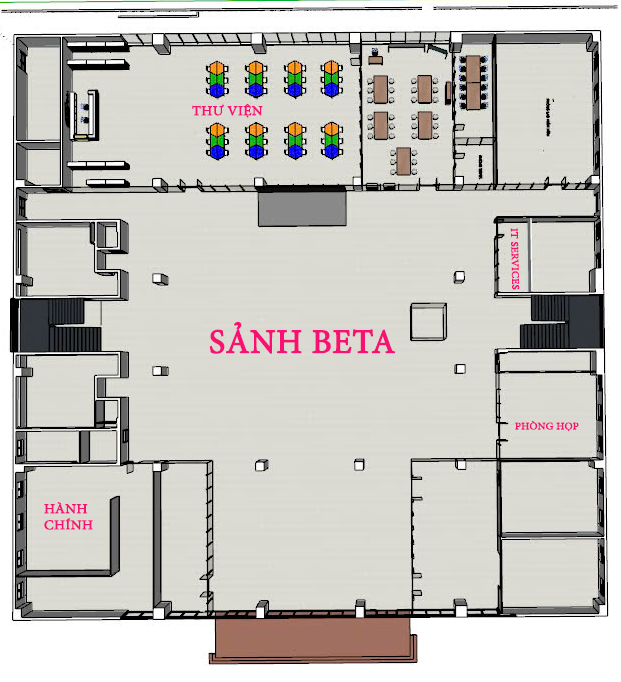
<style>
.page{position:relative;width:621px;height:682px;background:#dbdbd3}
.page>*{position:absolute;margin:0}
.t1{font:13.5px "MinionPro-Regular";color:#f81173;font-weight:bold;scale:1.07 1}
.t2{font:10px "MinionPro-Regular";color:#f81173;font-weight:bold;scale:1.06 1}
.t3{font:34px "MinionPro-Regular";color:#f81173;font-weight:bold}
</style>
<div class="page">
<p class="t1" style="left:192px;top:103px;width:71px;height:15px">THƯ VIỆN</p>
<p class="t2" style="left:510px;top:228px;width:10px;height:62px;rotate:89deg">IT SERVICES</p>
<p class="t3" style="left:209px;top:321px;width:186px;height:33px">SẢNH BETA</p>
<p class="t2" style="left:515px;top:420px;width:64px;height:12px">PHÒNG HỌP</p>
<p class="t1" style="left:44px;top:502px;width:49px;height:28px;text-align:right">HÀNH<br>CHÍNH</p>
</div>
